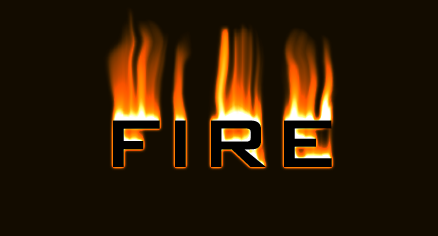
<style>
.page{position:relative;width:438px;height:236px;background:#130c00}
.page>*{position:absolute;margin:0}
.t1{font:90px "BankGothicBold";letter-spacing:0.015em;color:#000000}
</style>
<div class="page">
<p class="t1" style="left:113px;top:120px;width:219px;height:47px">FIRE</p>
</div>
